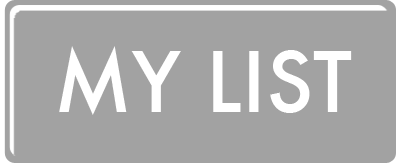
<style>
.page{position:relative;width:400px;height:163px;background:#a2a2a2}
.page>*{position:absolute;margin:0}
.t1{font:81.3px "Futura-Medium";color:#ffffff;text-transform:uppercase}
</style>
<div class="page">
<p class="t1" style="left:59px;top:46px;width:293px;height:69px">my list</p>
</div>
